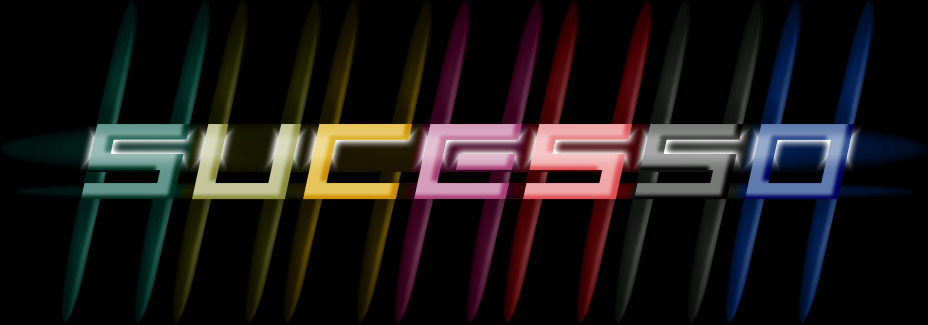
<style>
.page{position:relative;width:928px;height:325px;background:#000000}
.page>*{position:absolute;margin:0}
.t1{font:110.7px "FOTBullheaded";letter-spacing:0.015em;font-style:italic;scale:1.23 1}
</style>
<div class="page">
<p class="t1" style="left:81px;top:124px;width:774px;height:76px">SUCESSO</p>
</div>
